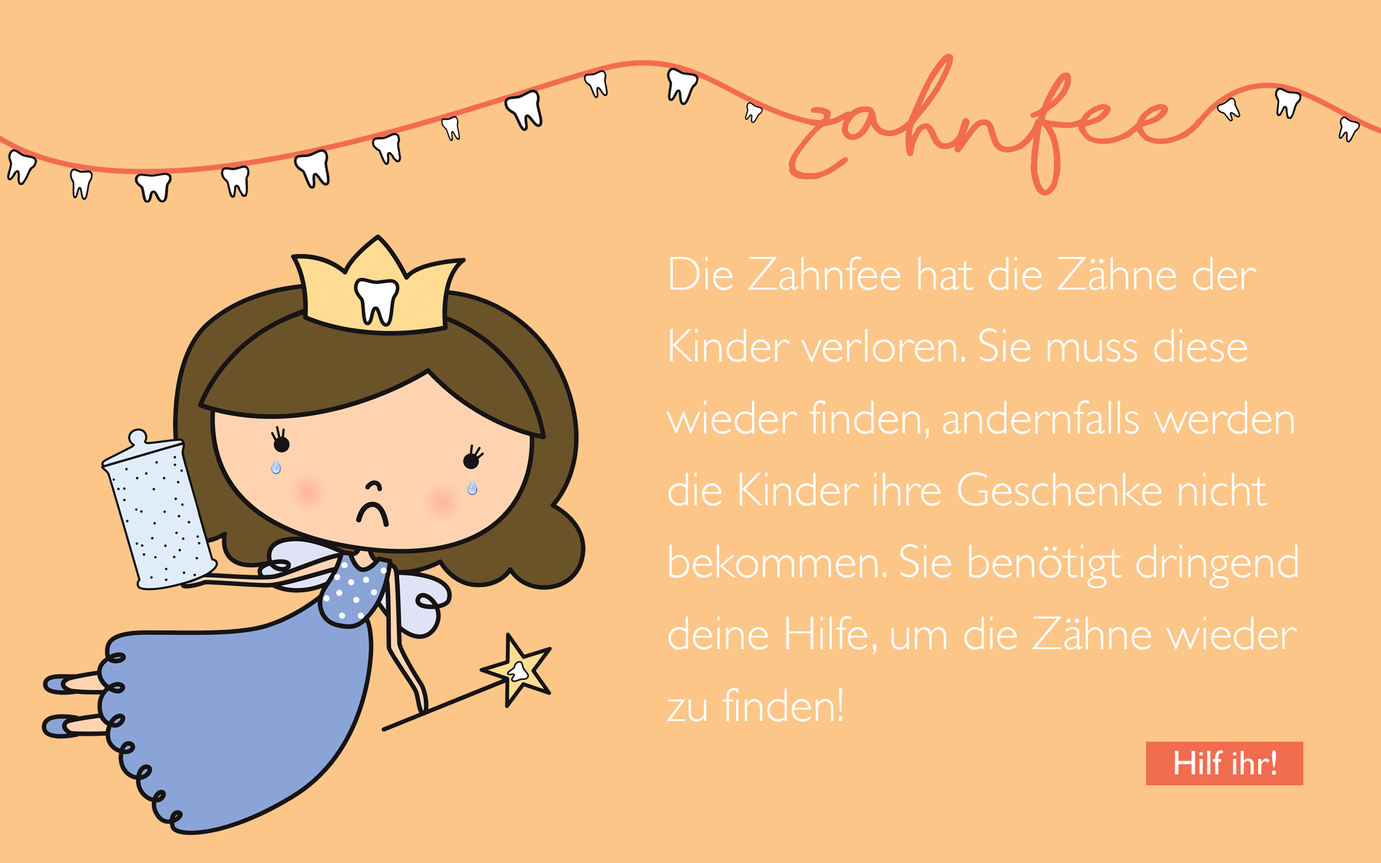
<style>
.page{position:relative;width:1381px;height:863px;background:#fdc689}
.page>*{position:absolute;margin:0}
.t1{font:95.9px "ShorelinesScriptBold";color:#f26c4f}
.t2{font:48px/71.9px "GillSans-Light";color:#ffffff}
.t3{font:34.5px "GillSans";color:#ffffff}
</style>
<div class="page">
<p class="t1" style="left:788px;top:54px;width:415px;height:142px">zahnfee</p>
<p class="t2" style="left:667px;top:257px;width:631px;height:465px">Die Zahnfee hat die Zähne der Kinder verloren. Sie muss diese wieder finden, andernfalls werden die Kinder ihre Geschenke nicht bekommen. Sie benötigt dringend deine Hilfe, um die Zähne wieder zu finden!</p>
<p class="t3" style="left:1175px;top:751px;width:101px;height:24px">Hilf ihr!</p>
</div>
